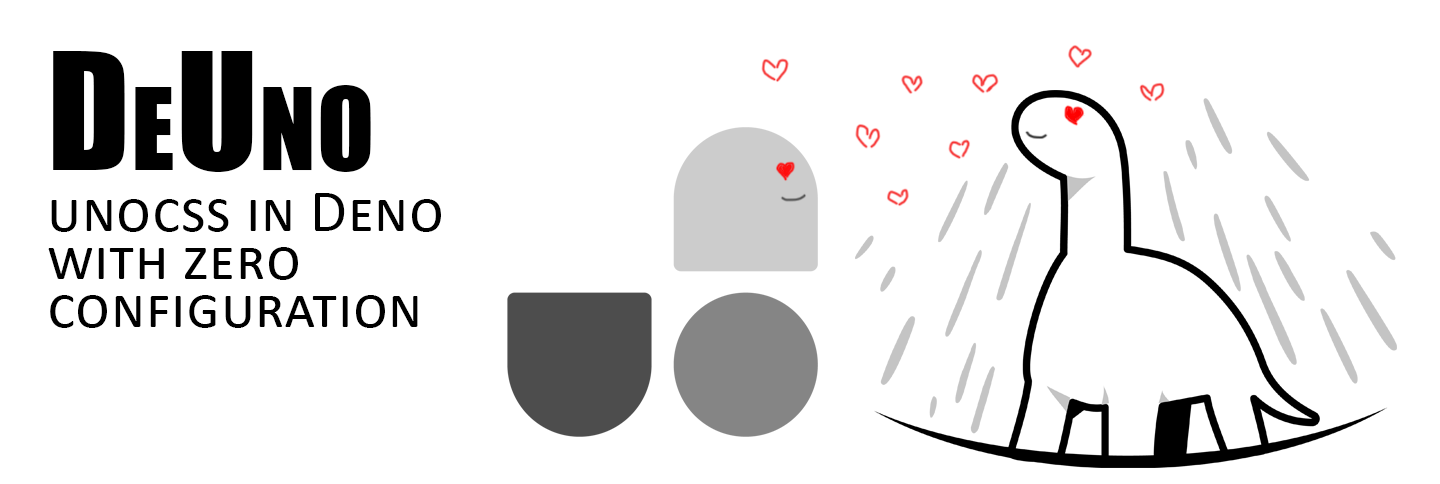
<style>
.page{position:relative;width:1440px;height:484px;background:#ffffff}
.page>*{position:absolute;margin:0}
.t1{font:150px "Impact";letter-spacing:0.01em;color:#000000;font-variant:small-caps}
.t2{font:60px/48px "Calibri";letter-spacing:0.01em;color:#000000;font-variant:small-caps}
</style>
<div class="page">
<p class="t1" style="left:53px;top:51px;width:318px;height:121px">DeUno</p>
<p class="t2" style="left:48px;top:193px;width:393px;height:135px">unocss in Deno<br>with zero<br>configuration</p>
</div>
